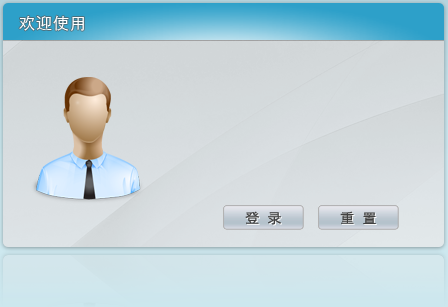
<style>
.page{position:relative;width:448px;height:307px}
.page>*{position:absolute;margin:0}
.t1{font:14px "STXihei";color:#414141;font-weight:bold}
</style>
<div class="page">
<p class="t1" style="left:245px;top:211px;width:36px;height:14px">登  录</p>
<p class="t1" style="left:340px;top:211px;width:36px;height:14px">重  置</p>
</div>
